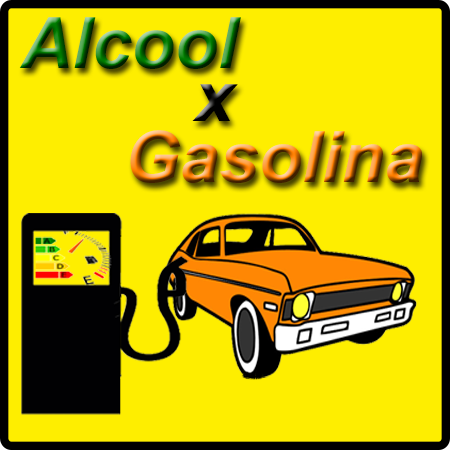
<style>
.page{position:relative;width:450px;height:450px;background:#feee00}
.page>*{position:absolute;margin:0}
.t1{font:70.8px "Arial-BoldItalicMT"}
.t2{font:70.8px "Arial-BoldItalicMT";color:#010104}
</style>
<div class="page">
<p class="t1" style="left:19px;top:17px;width:222px;height:52px">Alcool</p>
<p class="t2" style="left:192px;top:84px;width:46px;height:37px">x</p>
<p class="t1" style="left:130px;top:130px;width:292px;height:53px">Gasolina</p>
</div>
